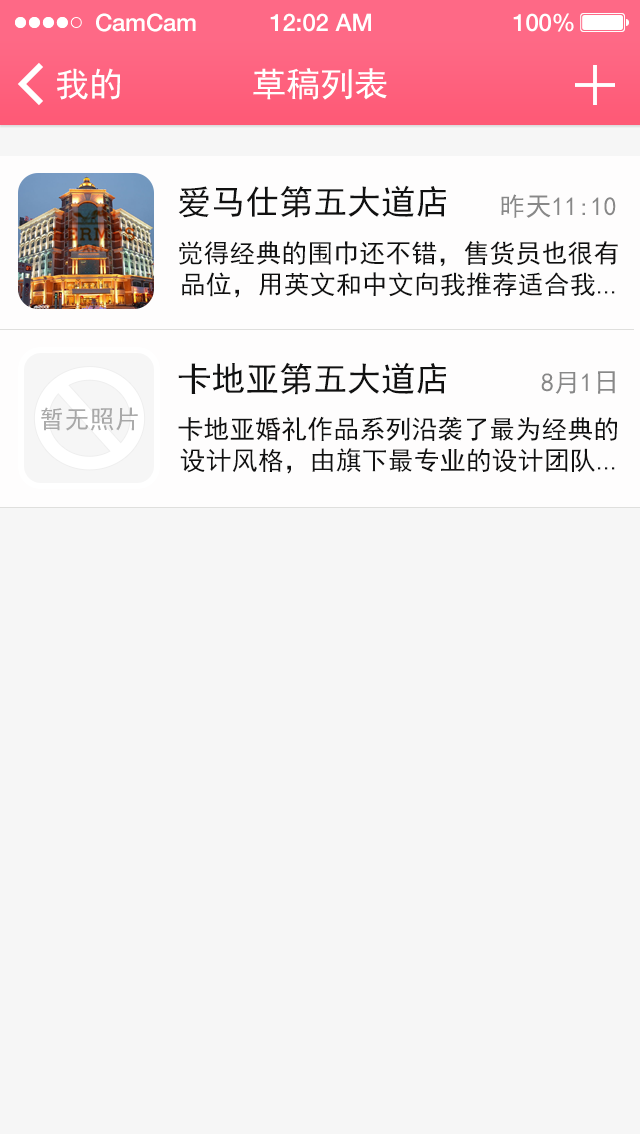
<style>
.page{position:relative;width:640px;height:1136px;background:#f6f6f6}
.page>*{position:absolute;margin:0}
.t1{font:24px "HelveticaNeue-Medium";color:#ffffff}
.t2{font:34px "SimHei";color:#ffffff}
.t3{font:34px "SimHei";color:#111111}
.t4{font:26px "SimHei";color:#888888}
.t5{font:26px "SimHei";color:#111111}
.t6{font:26px "ArialMT";color:#111111}
.t7{font:25.1px "SimHei";color:#a8a8a8}
</style>
<div class="page">
<p class="t1" style="left:96px;top:13px;width:100px;height:19px">CamCam</p>
<p class="t1" style="left:270px;top:13px;width:101px;height:19px">12:02 AM</p>
<p class="t1" style="left:513px;top:13px;width:61px;height:19px">100%</p>
<p class="t2" style="left:57px;top:68px;width:63px;height:32px">我的</p>
<p class="t2" style="left:253px;top:68px;width:134px;height:32px">草稿列表</p>
<p class="t3" style="left:178px;top:185px;width:268px;height:33px">爱马仕第五大道店</p>
<p class="t4" style="left:501px;top:194px;width:115px;height:24px">昨天11:10</p>
<p class="t5" style="left:179px;top:240px;width:439px;height:58px;text-align:center">觉得经典的围巾还不错，售货员也很有<br>品位，用英文和中文向我推荐适合我<span class="t6">...</span></p>
<p class="t3" style="left:178px;top:362px;width:268px;height:33px">卡地亚第五大道店</p>
<p class="t4" style="left:541px;top:371px;width:74px;height:23px">8月1日</p>
<p class="t7" style="left:41px;top:407px;width:97px;height:24px">暂无照片</p>
<p class="t5" style="left:178px;top:416px;width:439px;height:58px;text-align:center">卡地亚婚礼作品系列沿袭了最为经典的<br>设计风格，由旗下最专业的设计团队<span class="t6">...</span></p>
</div>
